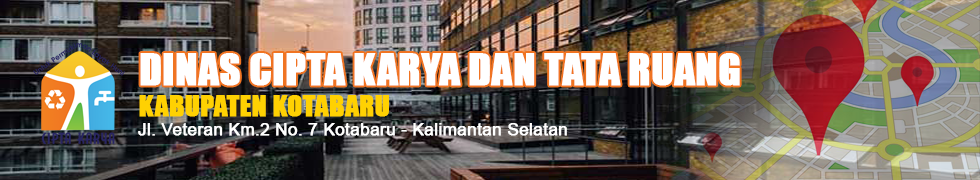
<style>
.page{position:relative;width:980px;height:180px}
.page>*{position:absolute;margin:0}
.t1{font:40px "Impact";color:#ffffff;font-weight:bold}
.t2{font:27px "Impact";color:#ffd102;font-weight:bold}
.t3{font:17px "ArialMT";color:#ffffff;font-weight:bold}
</style>
<div class="page">
<p class="t1" style="left:140px;top:53px;width:600px;height:33px">DINAS CIPTA KARYA DAN TATA RUANG</p>
<p class="t2" style="left:139px;top:95px;width:250px;height:22px">KABUPATEN KOTABARU</p>
<p class="t3" style="left:138px;top:123px;width:429px;height:13px">Jl. Veteran Km.2 No. 7 Kotabaru - Kalimantan Selatan</p>
</div>
